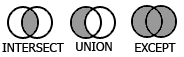
<style>
.page{position:relative;width:184px;height:57px;background:#ffffff}
.page>*{position:absolute;margin:0}
.t1{font:12px "Tahoma";color:#000000}
</style>
<div class="page">
<p class="t1" style="left:2px;top:43px;width:62px;height:9px">INTERSECT</p>
<p class="t1" style="left:76px;top:42px;width:36px;height:9px">UNION</p>
<p class="t1" style="left:135px;top:43px;width:41px;height:9px">EXCEPT</p>
</div>
